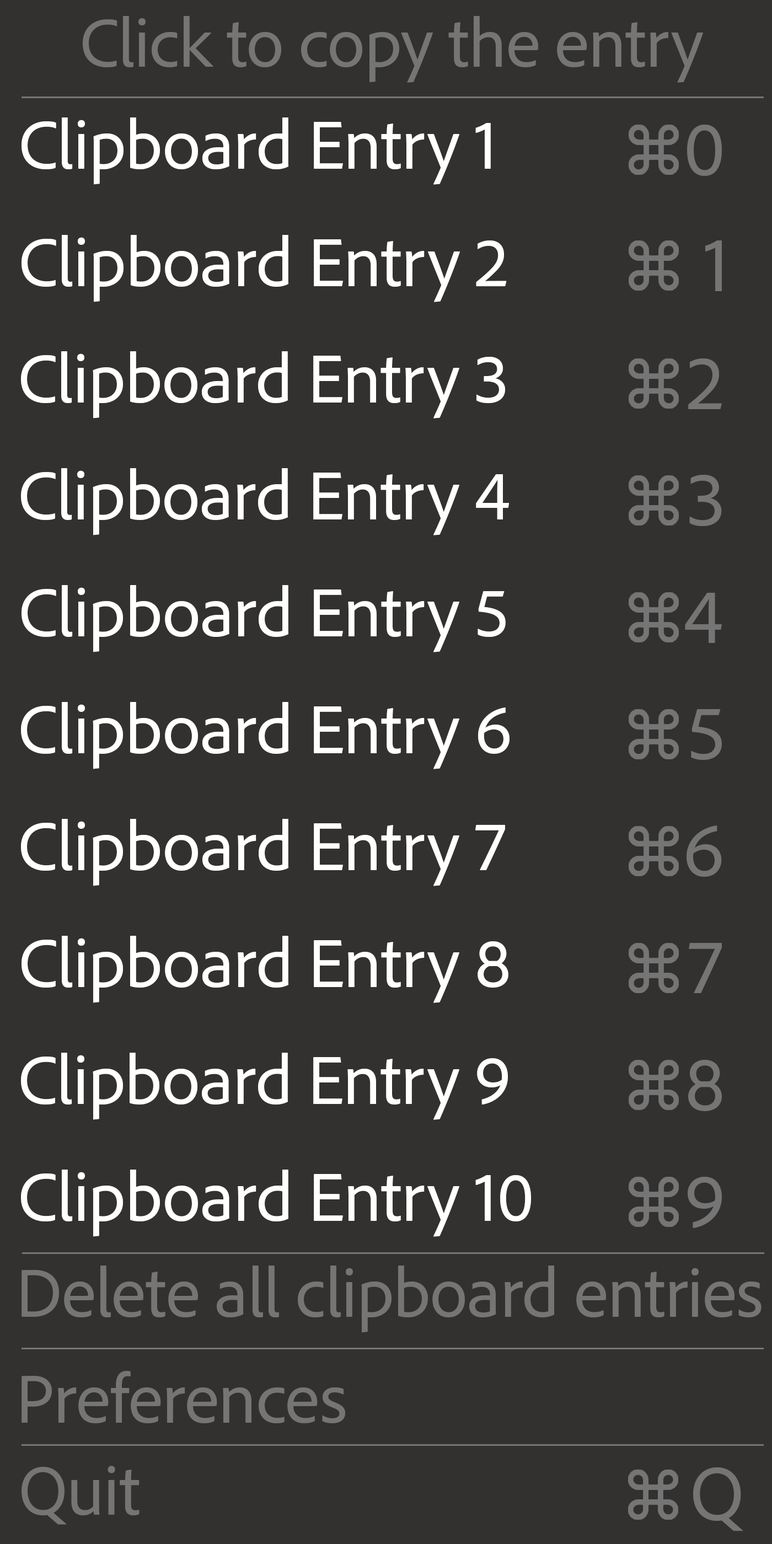
<style>
.page{position:relative;width:772px;height:1544px;background:#32312f}
.page>*{position:absolute;margin:0}
.t1{font:70.7px "AdobeClean-Regular";letter-spacing:-0.01em;color:#757575}
.t2{font:71.3px "AdobeClean-Regular";letter-spacing:-0.01em;color:#ffffff}
.t3{font:78.9px "AdobeClean-Regular";letter-spacing:-0.01em;color:#757575}
.t4{font:71.3px "AdobeClean-Regular";letter-spacing:-0.01em;color:#757575}
</style>
<div class="page">
<p class="t1" style="left:83px;top:16px;width:620px;height:67px">Click to copy the entry</p>
<p class="t2" style="left:22px;top:117px;width:469px;height:68px">Clipboard Entry 1</p>
<p class="t3" style="left:687px;top:124px;width:35px;height:52px">0</p>
<p class="t2" style="left:22px;top:235px;width:485px;height:67px">Clipboard Entry 2</p>
<p class="t3" style="left:705px;top:240px;width:17px;height:51px">1</p>
<p class="t2" style="left:21px;top:351px;width:484px;height:68px">Clipboard Entry 3</p>
<p class="t3" style="left:688px;top:358px;width:34px;height:51px">2</p>
<p class="t2" style="left:21px;top:468px;width:489px;height:68px">Clipboard Entry 4</p>
<p class="t3" style="left:689px;top:475px;width:33px;height:51px">3</p>
<p class="t2" style="left:22px;top:585px;width:484px;height:67px">Clipboard Entry 5</p>
<p class="t3" style="left:685px;top:592px;width:37px;height:51px">4</p>
<p class="t2" style="left:21px;top:702px;width:489px;height:67px">Clipboard Entry 6</p>
<p class="t3" style="left:691px;top:709px;width:31px;height:51px">5</p>
<p class="t2" style="left:21px;top:819px;width:484px;height:67px">Clipboard Entry 7</p>
<p class="t3" style="left:687px;top:826px;width:35px;height:51px">6</p>
<p class="t2" style="left:22px;top:936px;width:487px;height:67px">Clipboard Entry 8</p>
<p class="t3" style="left:689px;top:943px;width:33px;height:50px">7</p>
<p class="t2" style="left:21px;top:1053px;width:487px;height:67px">Clipboard Entry 9</p>
<p class="t3" style="left:688px;top:1060px;width:34px;height:51px">8</p>
<p class="t2" style="left:21px;top:1170px;width:510px;height:67px">Clipboard Entry 10</p>
<p class="t3" style="left:688px;top:1176px;width:34px;height:52px">9</p>
<p class="t4" style="left:22px;top:1266px;width:740px;height:67px">Delete all clipboard entries</p>
<p class="t4" style="left:22px;top:1371px;width:323px;height:53px">Preferences</p>
<p class="t3" style="left:693px;top:1468px;width:50px;height:64px">Q</p>
</div>
